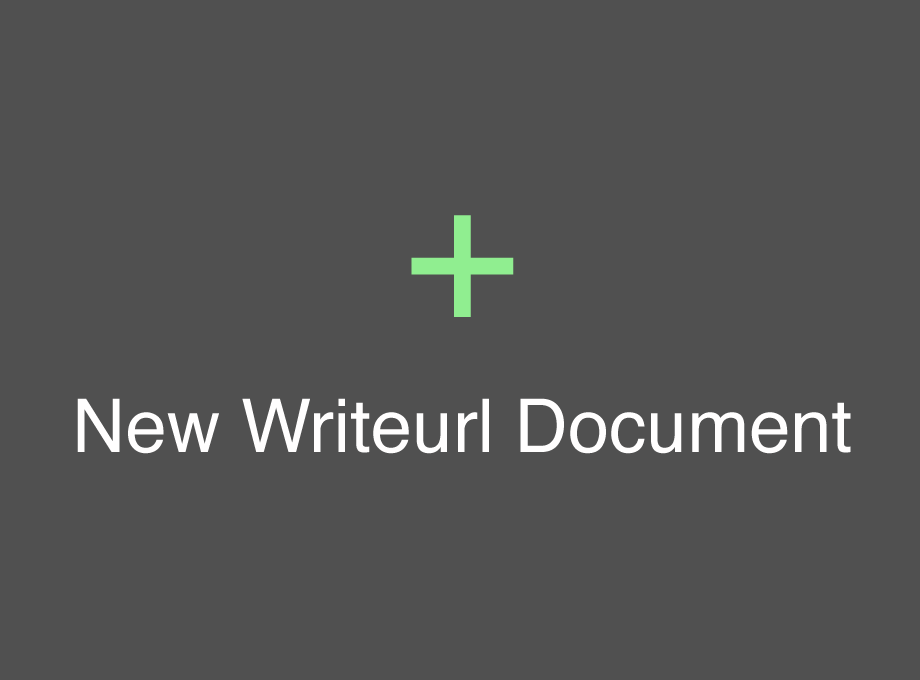
<style>
.page{position:relative;width:920px;height:680px;background:#505050}
.page>*{position:absolute;margin:0}
.t1{font:200px "Helvetica";color:#90ee90}
.t2{font:74px "Helvetica";color:#fffefe}
</style>
<div class="page">
<p class="t1" style="left:411px;top:215px;width:103px;height:102px">+</p>
<p class="t2" style="left:77px;top:398px;width:774px;height:56px">New Writeurl Document</p>
</div>
